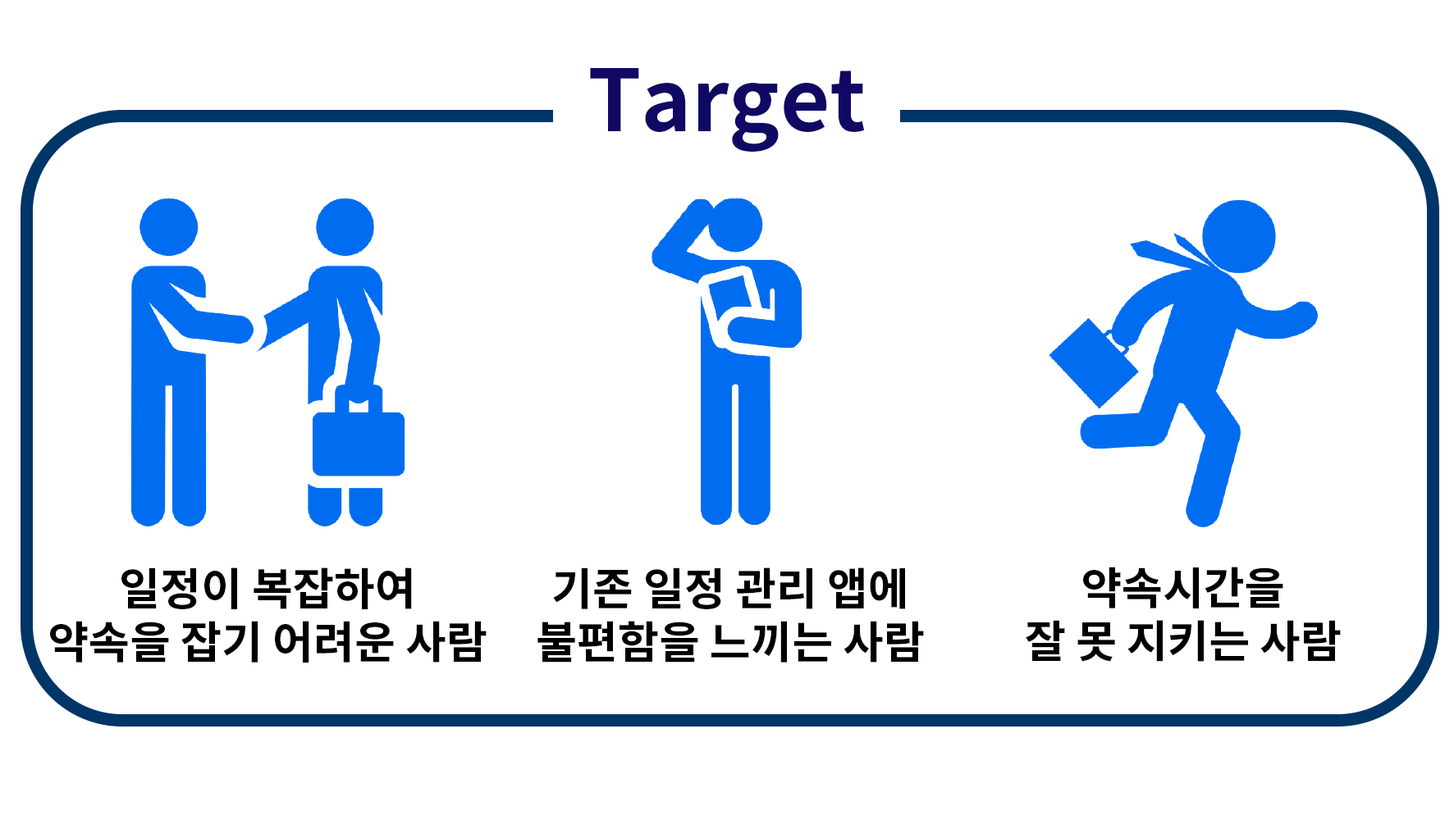
<style>
.page{position:relative;width:1454px;height:820px;background:#ffffff}
.page>*{position:absolute;margin:0}
.t1{font:85.5px "NotoSansCJKkr-Bold";color:#100964}
.t2{font:44.4px "NotoSansCJKkr-Bold";color:#000000}
</style>
<div class="page">
<p class="t1" style="left:590px;top:68px;width:275px;height:84px">Target</p>
<p class="t2" style="left:50px;top:568px;width:436px;height:95px;text-align:center">일정이 복잡하여<br>약속을 잡기 어려운 사람</p>
<p class="t2" style="left:537px;top:568px;width:387px;height:95px;text-align:center">기존 일정 관리 앱에<br>불편함을 느끼는 사람</p>
<p class="t2" style="left:1025px;top:567px;width:315px;height:95px;text-align:center">약속시간을<br>잘 못 지키는 사람</p>
</div>
